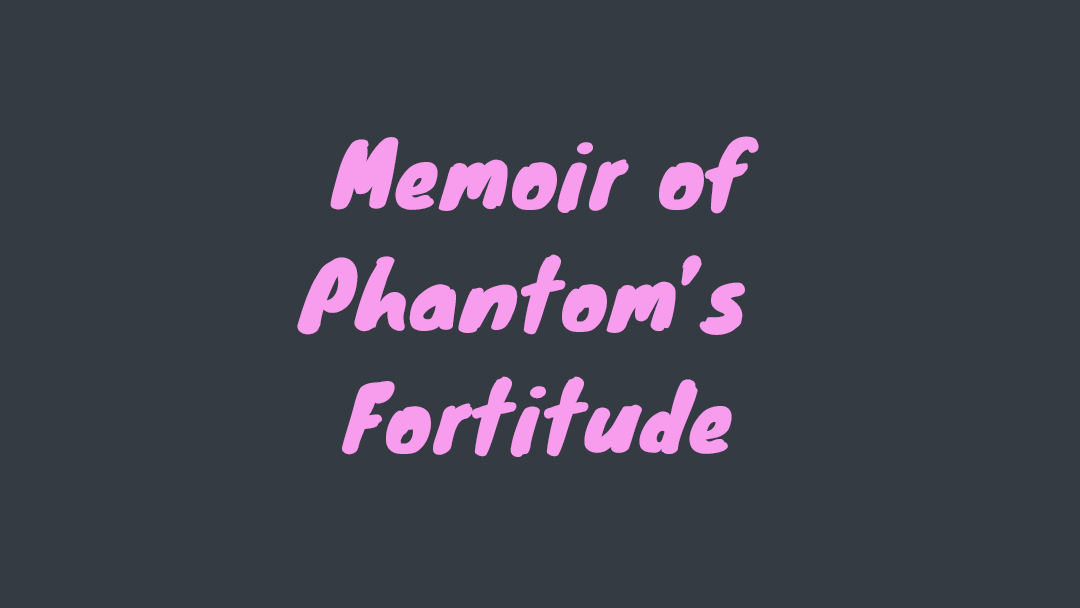
<style>
.page{position:relative;width:1080px;height:608px;background:#343b42}
.page>*{position:absolute;margin:0}
.t1{font:87.8px/121.8px "Knewave-Regular";letter-spacing:0.03em;color:#f89ced}
</style>
<div class="page">
<p class="t1" style="left:297px;top:136px;width:462px;height:321px;text-align:center">Memoir of<br>Phantom’s <br>Fortitude</p>
</div>
